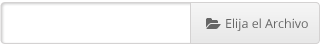
<style>
.page{position:relative;width:320px;height:45px;background:#ffffff}
.page>*{position:absolute;margin:0}
.t1{font:12.5px "OpenSans";color:#666666}
</style>
<div class="page">
<p class="t1" style="left:226px;top:18px;width:82px;height:13px">Elija el Archivo</p>
</div>
